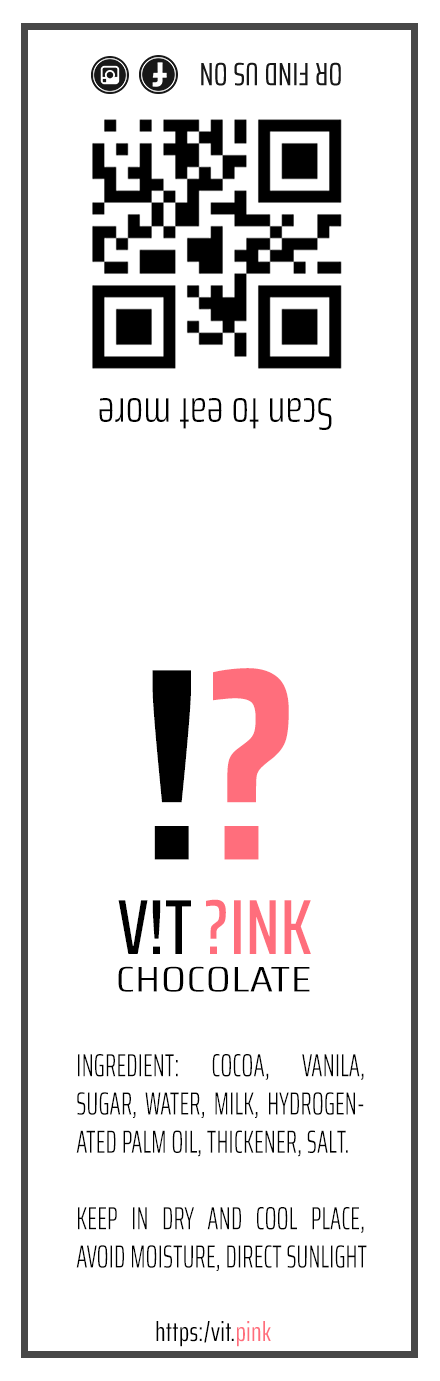
<style>
.page{position:relative;width:440px;height:1381px;background:#ffffff}
.page>*{position:absolute;margin:0}
.t1{font:32.1px "SairaExtraCondensed-Regular";letter-spacing:0.01em;color:#181818}
.t2{font:45.6px "SairaExtraCondensed-Light";letter-spacing:0.01em;color:#000000}
.t3{font:274.7px "SairaExtraCondensed-Bold";letter-spacing:0.01em;color:#000000}
.t4{font:274.7px "SairaExtraCondensed-Bold";letter-spacing:0.01em;color:#ff6e7c}
.t5{font:78.1px "SairaExtraCondensed-Medium";letter-spacing:0.01em;color:#ff6e7c}
.t6{font:78.1px "SairaExtraCondensed-Medium";letter-spacing:0.01em;color:#000000}
.t7{font:35.5px "SairaExtraCondensed-Light";letter-spacing:0.01em;color:#000000;scale:1.66 1}
.t8{font:31.9px "SairaExtraCondensed-Light";letter-spacing:0.01em;color:#000000;scale:0.86 1}
.t9{font:27px "SairaExtraCondensed-Regular";letter-spacing:0.01em;color:#000000}
.t10{font:27px "SairaExtraCondensed-Regular";letter-spacing:0.01em;color:#ff6e7c}
</style>
<div class="page">
<p class="t1" style="left:201px;top:62px;width:140px;height:24px;rotate:180deg">OR FIND US ON</p>
<p class="t2" style="left:99px;top:398px;width:233px;height:32px;rotate:180deg">Scan to eat more</p>
<p class="t3" style="left:152px;top:668px;width:137px;height:192px">!<span class="t4">?</span></p>
<p class="t5" style="left:118px;top:899px;width:193px;height:55px"><span class="t6">V!T </span>?INK</p>
<p class="t7" style="left:118px;top:966px;width:192px;height:26px">CHOCOLATE</p>
<p class="t8" style="left:76px;top:1054px;width:291px;height:217px;text-align:justify">INGREDIENT: COCOA, VANILA, SUGAR, WATER, MILK, HYDROGENATED PALM OIL, THICKENER, SALT.<br><br>KEEP IN DRY AND COOL PLACE, AVOID MOISTURE, DIRECT SUNLIGHT</p>
<p class="t9" style="left:156px;top:1321px;width:115px;height:26px">https:/vit.<span class="t10">pink</span></p>
</div>
